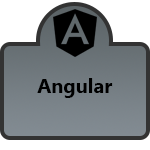
<style>
.page{position:relative;width:150px;height:150px;background:#ffffff}
.page>*{position:absolute;margin:0}
.t1{font:20px "Gadugi-Bold";color:#000000}
</style>
<div class="page">
<p class="t1" style="left:37px;top:78px;width:76px;height:20px">Angular</p>
</div>
